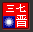
<style>
.page{position:relative;width:33px;height:32px;background:#f20000}
.page>*{position:absolute;margin:0}
.t1{font:10.4px "SimSun";color:#ffffff}
.t2{font:11.7px "SimSun";color:#ffffff}
</style>
<div class="page">
<p class="t1" style="left:6px;top:4px;width:20px;height:8px">三七</p>
<p class="t2" style="left:16px;top:15px;width:11px;height:12px">晋</p>
</div>
